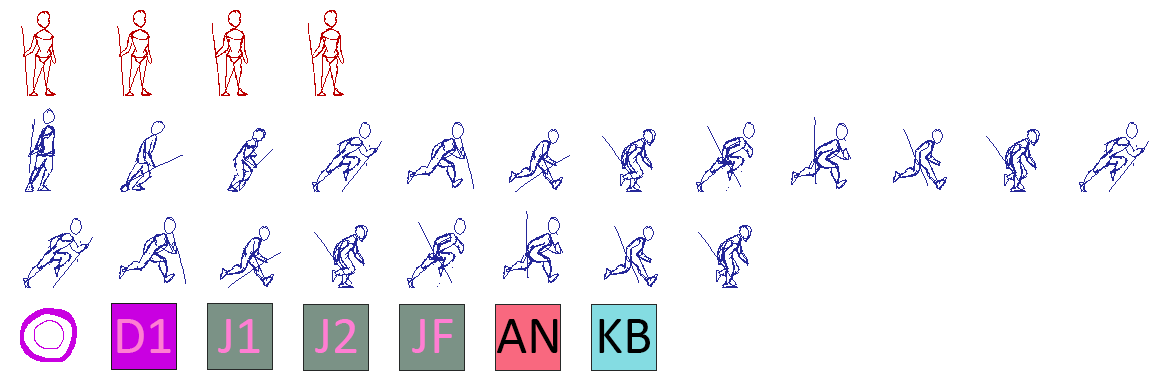
<style>
.page{position:relative;width:1152px;height:384px;background:#ffffff}
.page>*{position:absolute;margin:0}
.t1{font:54.4px "Calibri";color:#ff7dd3}
.t2{font:54.4px "Calibri";color:#000000}
</style>
<div class="page">
<p class="t1" style="left:117px;top:319px;width:54px;height:34px">D1</p>
<p class="t1" style="left:218px;top:319px;width:42px;height:34px">J1</p>
<p class="t1" style="left:315px;top:319px;width:42px;height:34px">J2</p>
<p class="t1" style="left:412px;top:319px;width:41px;height:34px">JF</p>
<p class="t2" style="left:496px;top:319px;width:62px;height:34px">AN</p>
<p class="t2" style="left:599px;top:319px;width:51px;height:34px">KB</p>
</div>
